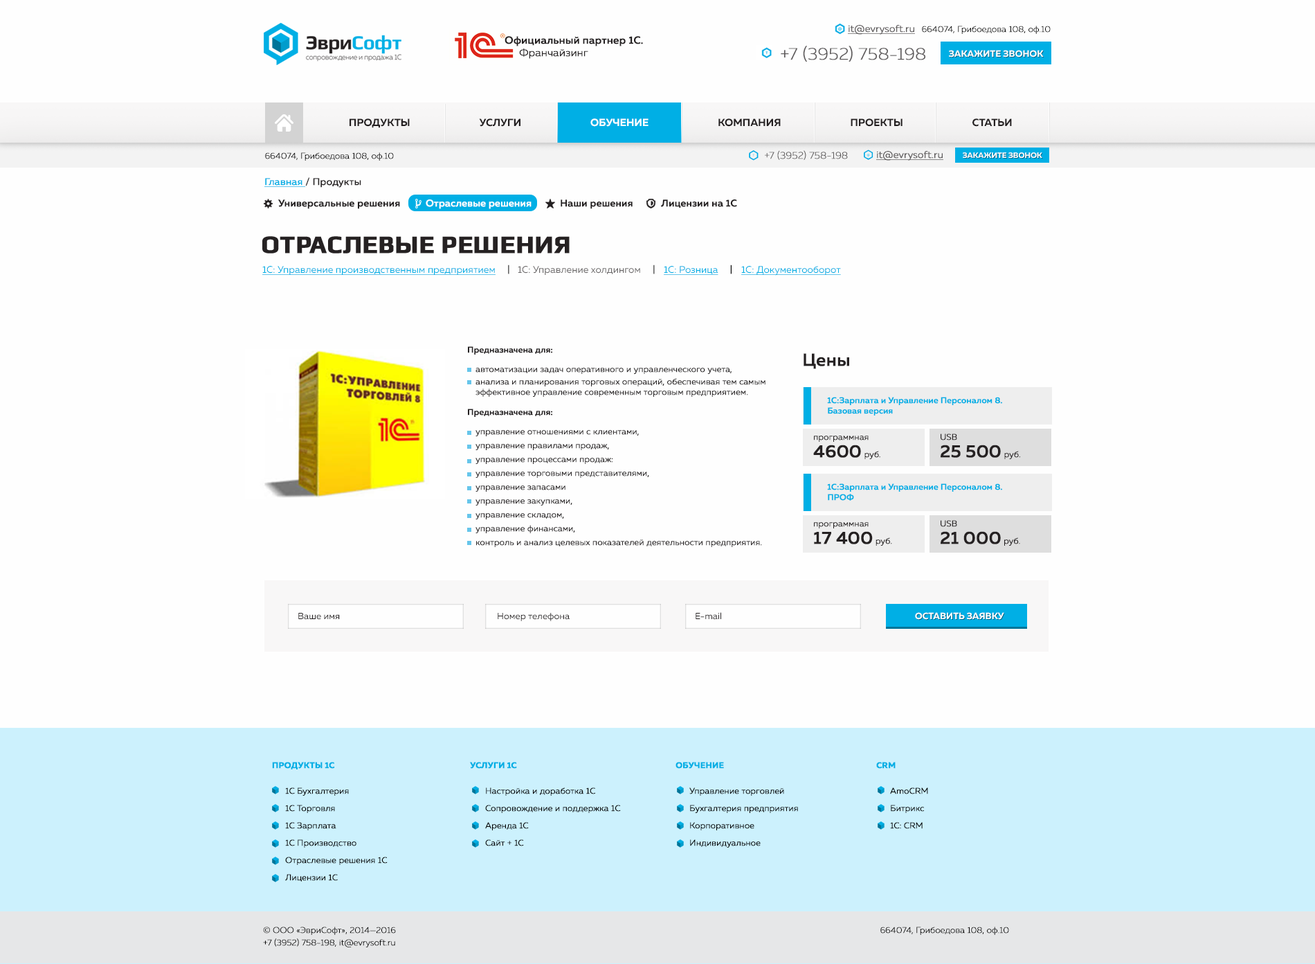
<style>
.page{position:relative;width:1315px;height:964px;background:#fefefe}
.page>*{position:absolute;margin:0}
.t1{font:9.7px "MullerLight";color:#5c595a;font-weight:bold;text-decoration:underline}
.t2{font:8.3px "MullerUltraLight";color:#000000;font-weight:bold}
.t3{font:10.4px/12.5px "MullerMedium";color:#231f20;font-weight:bold}
.t4{font:10.4px/12.5px "MullerLight";color:#231f20;font-weight:bold}
.t5{font:16.9px "MullerUltraLight";color:#5c595a;font-weight:bold}
.t6{font:9px "MullerBold";color:#ffffff}
.t7{font:10.4px "MullerBold";color:#231f20}
.t8{font:10.4px "MullerBold";color:#ffffff}
.t9{font:9.7px "MullerUltraLight";color:#5c595a;font-weight:bold}
.t10{font:7.6px "MullerBold";color:#ffffff}
.t11{font:9.7px "MullerRegular";color:#252122;font-weight:bold}
.t12{font:9.7px "MullerRegular";color:#00afe5;font-weight:bold;text-decoration:underline}
.t13{font:9.7px "MullerMedium";color:#231f20;font-weight:bold}
.t14{font:9.7px "MullerMedium";color:#ffffff;font-weight:bold}
.t15{font:24.9px "Play-Bold";color:#252122;font-weight:bold}
.t16{font:9.7px "MullerRegular";color:#00afe5;text-decoration:underline}
.t17{font:9.7px "MullerRegular";color:#000000}
.t18{font:9.7px "MullerRegular";color:#6c696a}
.t19{font:8.3px "MullerMedium";color:#252122;font-weight:bold}
.t20{font:17.3px "MullerMedium";color:#252122;font-weight:bold}
.t21{font:8.3px/12.5px "MullerLight";color:#252122;font-weight:bold}
.t22{font:8.3px/13.8px "MullerLight";color:#252122;font-weight:bold}
.t23{font:8.3px/10.4px "MullerLight";color:#252122;font-weight:bold}
.t24{font:8.3px/10.4px "MullerMedium";color:#00afe5;font-weight:bold}
.t25{font:8.3px "MullerLight";color:#252122;font-weight:bold}
.t26{font:9px "MullerRegular";color:#252122}
.t27{font:9px "MullerBold";color:#ffffff;text-transform:uppercase}
.t28{font:8.3px "MullerBold";color:#00afe5;font-weight:bold}
.t29{font:8.3px "MullerBold";color:#00afe5;text-transform:uppercase;font-weight:bold}
.t30{font:8.3px/17.3px "MullerLight";color:#000000;font-weight:bold}
.t31{font:8.3px/12.5px "MullerUltraLight";color:#000000;font-weight:bold}
</style>
<div class="page">
<p class="t1" style="left:848px;top:25px;width:67px;height:10px">it@evrysoft.ru</p>
<p class="t2" style="left:922px;top:26px;width:129px;height:8px">664074, Грибоедова 108, оф.10</p>
<p class="t3" style="left:505px;top:36px;width:138px;height:23px">Официальный партнер 1С.<span class="t4"> <br>     Франчайзинг</span></p>
<p class="t5" style="left:781px;top:46px;width:145px;height:16px">+7 (3952) 758-198</p>
<p class="t6" style="left:949px;top:50px;width:95px;height:7px">ЗАКАЖИТЕ ЗВОНОК</p>
<p class="t7" style="left:350px;top:118px;width:662px;height:10px">ПРОДУКТЫ                              УСЛУГИ                         <span class="t8">     ОБУЧЕНИЕ</span>                              КОМПАНИЯ                              ПРОЕКТЫ                              СТАТЬИ</p>
<p class="t2" style="left:265px;top:152px;width:129px;height:9px">664074, Грибоедова 108, оф.10</p>
<p class="t9" style="left:765px;top:150px;width:83px;height:10px">+7 (3952) 758-198</p>
<p class="t1" style="left:876px;top:151px;width:68px;height:10px">it@evrysoft.ru</p>
<p class="t10" style="left:963px;top:152px;width:80px;height:7px">ЗАКАЖИТЕ ЗВОНОК</p>
<p class="t11" style="left:264px;top:177px;width:97px;height:11px"><span class="t12">Главная </span>/ Продукты</p>
<p class="t13" style="left:278px;top:199px;width:122px;height:10px">Универсальные решения</p>
<p class="t14" style="left:426px;top:199px;width:106px;height:10px">Отраслевые решения</p>
<p class="t13" style="left:561px;top:199px;width:72px;height:10px">Наши решения</p>
<p class="t13" style="left:661px;top:199px;width:76px;height:9px">Лицензии на 1С</p>
<p class="t15" style="left:262px;top:236px;width:308px;height:17px">ОТРАСЛЕВЫЕ РЕШЕНИЯ</p>
<p class="t16" style="left:262px;top:264px;width:248px;height:11px">1С: Управление производственным предприятием<span class="t17">     |</span></p>
<p class="t18" style="left:518px;top:264px;width:137px;height:11px">1С: Управление холдингом<span class="t17">     |</span></p>
<p class="t16" style="left:664px;top:264px;width:68px;height:11px">1С: Розница<span class="t17">     |</span></p>
<p class="t16" style="left:741px;top:266px;width:100px;height:10px">1С: Документооборот</p>
<p class="t19" style="left:468px;top:346px;width:84px;height:8px">Предназначена для:</p>
<p class="t20" style="left:804px;top:353px;width:45px;height:16px">Цены</p>
<p class="t21" style="left:476px;top:368px;width:290px;height:29px"><span class="t22">автоматизации задач оперативного и управленческого учета,<br></span>анализа и планирования торговых операций, обеспечивая тем самым <span class="t23">эффективное управление современным торговым предприятием.</span></p>
<p class="t24" style="left:827px;top:397px;width:175px;height:18px">1С:Зарплата и Управление Персоналом 8. <br>Базовая версия</p>
<p class="t19" style="left:468px;top:408px;width:84px;height:9px">Предназначена для:</p>
<p class="t22" style="left:476px;top:430px;width:286px;height:117px">управление отношениями с клиентами,<br>управление правилами продаж,<br>управление процессами продаж:<br>управление торговыми представителями,<br>управление запасами<br>управление закупками,<br>управление складом,<br>управление финансами,<br>контроль и анализ целевых показателей деятельности предприятия.</p>
<p class="t25" style="left:814px;top:435px;width:55px;height:7px">программная</p>
<p class="t25" style="left:941px;top:433px;width:16px;height:7px">USB</p>
<p class="t20" style="left:813px;top:444px;width:68px;height:15px">4600<span class="t25"> руб.</span></p>
<p class="t20" style="left:941px;top:444px;width:80px;height:15px">25 500<span class="t25"> руб.</span></p>
<p class="t24" style="left:827px;top:483px;width:175px;height:18px">1С:Зарплата и Управление Персоналом 8.<br>ПРОФ</p>
<p class="t25" style="left:941px;top:520px;width:16px;height:7px">USB</p>
<p class="t25" style="left:814px;top:522px;width:55px;height:6px">программная</p>
<p class="t20" style="left:814px;top:531px;width:78px;height:15px">17 400<span class="t25"> руб.</span></p>
<p class="t20" style="left:941px;top:531px;width:79px;height:15px">21 000<span class="t25"> руб.</span></p>
<p class="t26" style="left:298px;top:613px;width:42px;height:7px">Ваше имя</p>
<p class="t26" style="left:498px;top:613px;width:72px;height:8px">Номер телефона</p>
<p class="t26" style="left:696px;top:612px;width:25px;height:8px">E-mail</p>
<p class="t27" style="left:915px;top:612px;width:90px;height:8px">ОСтавить заявку</p>
<p class="t28" style="left:272px;top:762px;width:62px;height:7px">ПРОДУКТЫ 1С</p>
<p class="t29" style="left:470px;top:762px;width:47px;height:6px">Услуги 1С</p>
<p class="t29" style="left:676px;top:762px;width:48px;height:6px">Обучение</p>
<p class="t28" style="left:876px;top:762px;width:20px;height:6px">CRM</p>
<p class="t30" style="left:285px;top:787px;width:103px;height:94px">1С Бухгалтерия<br>1С Торговля<br>1С Зарплата<br>1С Производство<br>Отраслевые решения 1С<br>Лицензии 1С</p>
<p class="t30" style="left:485px;top:787px;width:136px;height:59px">Настройка и доработка 1С<br>Сопровождение и поддержка 1С<br>Аренда 1С<br>Сайт + 1С</p>
<p class="t30" style="left:690px;top:787px;width:108px;height:60px">Управление торговлей<br>Бухгалтерия предприятия<br>Корпоративное<br>Индивидуальное</p>
<p class="t30" style="left:890px;top:787px;width:38px;height:42px">AmoCRM<br>Битрикс<br>1C: CRM</p>
<p class="t31" style="left:263px;top:926px;width:133px;height:21px">© ООО «ЭвриСофт», 2014—2016<br>+7 (3952) 758-198, it@evrysoft.ru</p>
<p class="t2" style="left:881px;top:926px;width:128px;height:9px">664074, Грибоедова 108, оф.10</p>
</div>
